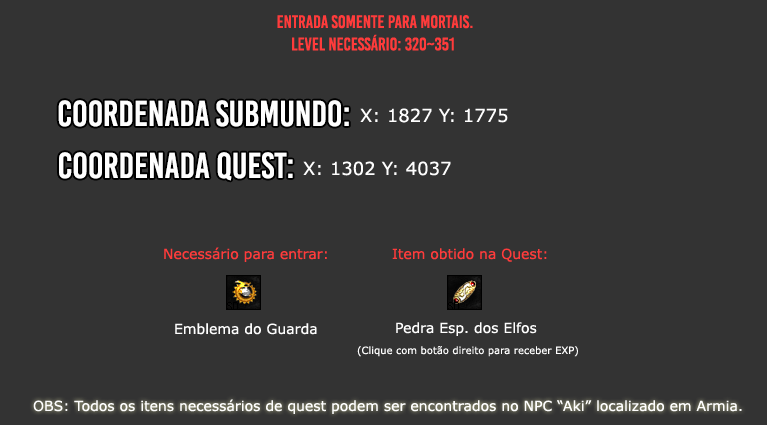
<style>
.page{position:relative;width:767px;height:425px;background:#333333}
.page>*{position:absolute;margin:0}
.t1{font:18px "BebasKai";color:#ff3b3b}
.t2{font:36px "BebasKai";color:#fefefe}
.t3{font:18px "Verdana";color:#fefefe}
.t4{font:14px "Verdana";color:#ff3b3b}
.t5{font:14px "Verdana";color:#fefefe}
.t6{font:10px "Verdana";color:#fefefe}
</style>
<div class="page">
<p class="t1" style="left:277px;top:15px;width:196px;height:14px">Entrada somente para mortais.</p>
<p class="t1" style="left:292px;top:34px;width:162px;height:17px">level necessário: 320~351</p>
<p class="t2" style="left:58px;top:100px;width:291px;height:27px">Coordenada submundo:</p>
<p class="t3" style="left:360px;top:108px;width:148px;height:15px">X: 1827 Y: 1775</p>
<p class="t2" style="left:59px;top:152px;width:234px;height:29px">Coordenada quest:</p>
<p class="t3" style="left:303px;top:161px;width:148px;height:15px">X: 1302 Y: 4037</p>
<p class="t4" style="left:164px;top:247px;width:163px;height:15px">Necessário para entrar:</p>
<p class="t4" style="left:392px;top:248px;width:155px;height:14px">Item obtido na Quest:</p>
<p class="t5" style="left:175px;top:323px;width:142px;height:12px">Emblema do Guarda</p>
<p class="t5" style="left:396px;top:322px;width:141px;height:14px">Pedra Esp. dos Elfos</p>
<p class="t6" style="left:357px;top:346px;width:221px;height:11px">(Clique com botão direito para receber EXP)</p>
<p class="t5" style="left:33px;top:399px;width:709px;height:15px">OBS: Todos os itens necessários de quest podem ser encontrados no NPC “Aki” localizado em Armia.</p>
</div>
